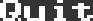
<style>
.page{position:relative;width:93px;height:21px;background:#333333}
.page>*{position:absolute;margin:0}
.t1{font:24px "PressStartK";color:#ffffff}
</style>
<div class="page">
<p class="t1" style="left:0px;top:0px;width:93px;height:21px">Quit</p>
</div>
